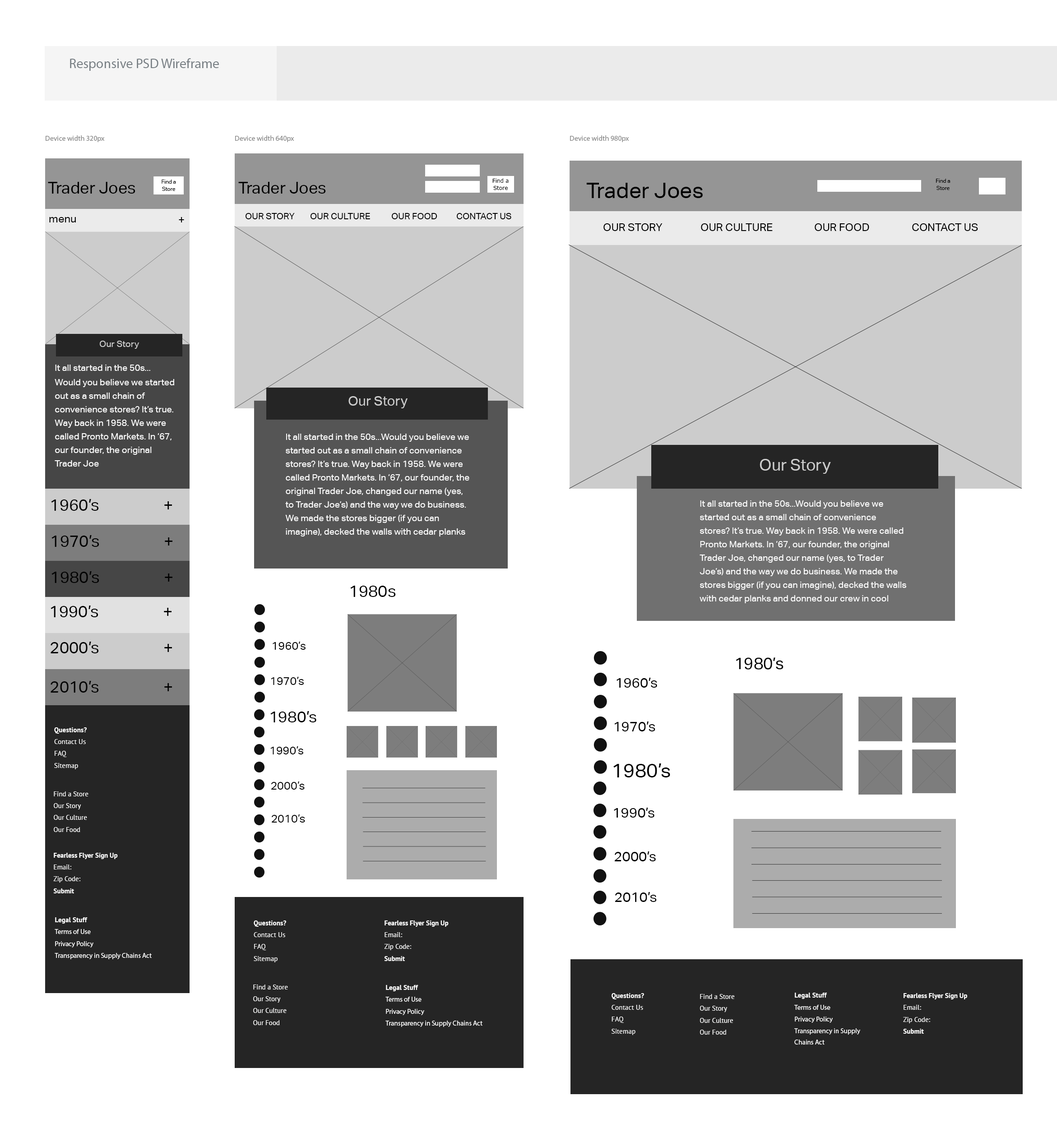
<style>
.page{position:relative;width:1057px;height:1128px;background:#ffffff}
.page>*{position:absolute;margin:0}
.t1{font:13.5px "MyriadPro-Regular";color:#787f84}
.t2{font:7.2px "MyriadPro-Regular";color:#878787}
.t3{font:16.2px "AktivGrotesk-Regular";color:#000000}
.t4{font:5.4px/6.3px "AktivGrotesk-Regular";color:#000000}
.t5{font:5.4px/6.3px "Verdana";color:#000000}
.t6{font:21.7px "AktivGrotesk-Regular";color:#000000}
.t7{font:10.8px "AktivGrotesk-Regular";color:#000000}
.t8{font:9px "AktivGrotesk-Regular";color:#000000}
.t9{font:9px "AktivGrotesk-Regular";color:#cccccc}
.t10{font:9px/13.5px "AktivGrotesk-Regular";color:#ffffff}
.t11{font:13.5px "AktivGrotesk-Regular";color:#cccccc}
.t12{font:16.2px "AktivGrotesk-Regular";color:#cccccc}
.t13{font:16.2px "AktivGrotesk-Regular";color:#020202}
.t14{font:11.3px "AktivGrotesk-Regular";color:#000000}
.t15{font:14.1px "AktivGrotesk-Regular";color:#000000}
.t16{font:15.8px "AktivGrotesk-Regular";color:#000000}
.t17{font:6.9px/11.3px "PTSans-Regular";color:#ffffff}
.t18{font:6.9px/11.3px "PTSans-Bold";color:#ffffff}
.t19{font:19.6px "AktivGrotesk-Regular";color:#000000}
.t20{font:6.8px/11.3px "PTSans-Regular";color:#ffffff}
.t21{font:6.8px/11.3px "PTSans-Bold";color:#ffffff}
.t22{font:6.8px/11.3px "MyriadPro-Regular";color:#ffffff}
</style>
<div class="page">
<p class="t1" style="left:70px;top:58px;width:149px;height:13px">Responsive PSD Wireframe</p>
<p class="t2" style="left:46px;top:135px;width:59px;height:7px">Device width 320px</p>
<p class="t2" style="left:235px;top:135px;width:59px;height:7px">Device width 640px</p>
<p class="t2" style="left:570px;top:135px;width:59px;height:7px">Device width 980px</p>
<p class="t3" style="left:48px;top:182px;width:87px;height:12px">Trader Joes</p>
<p class="t4" style="left:162px;top:180px;width:14px;height:11px;text-align:center">Find a <br>Store</p>
<p class="t3" style="left:238px;top:182px;width:88px;height:12px">Trader Joes</p>
<p class="t5" style="left:492px;top:178px;width:17px;height:12px;text-align:center">Find a <br>Store</p>
<p class="t6" style="left:586px;top:183px;width:117px;height:15px">Trader Joes</p>
<p class="t4" style="left:936px;top:179px;width:14px;height:11px;text-align:center">Find a <br>Store</p>
<p class="t7" style="left:49px;top:217px;width:27px;height:5px">menu</p>
<p class="t7" style="left:179px;top:217px;width:5px;height:5px">+</p>
<p class="t8" style="left:246px;top:213px;width:265px;height:6px">OUR STORY  OUR CULTURE   OUR FOOD   CONTACT US</p>
<p class="t7" style="left:603px;top:223px;width:375px;height:8px">OUR STORY   OUR CULTURE    OUR FOOD    CONTACT US</p>
<p class="t9" style="left:100px;top:341px;width:39px;height:8px">Our Story</p>
<p class="t10" style="left:55px;top:365px;width:119px;height:102px">It all started in the 50s...<br>Would you believe we started out as a small chain of convenience stores? It’s true. Way back in 1958. We were called Pronto Markets. In ‘67, our founder, the original Trader Joe</p>
<p class="t11" style="left:348px;top:396px;width:60px;height:12px">Our Story</p>
<p class="t10" style="left:285px;top:434px;width:184px;height:103px">It all started in the 50s...Would you believe we started out as a small chain of convenience stores? It’s true. Way back in 1958. We were called Pronto Markets. In ‘67, our founder, the original Trader Joe, changed our name (yes, to Trader Joe’s) and the way we do business. We made the stores bigger (if you can imagine), decked the walls with cedar planks and donned our crew in cool Hawaiian shirts.</p>
<p class="t12" style="left:760px;top:459px;width:71px;height:15px">Our Story</p>
<p class="t13" style="left:51px;top:499px;width:121px;height:12px">1960’s    +</p>
<p class="t10" style="left:699px;top:500px;width:207px;height:103px">It all started in the 50s...Would you believe we started out as a small chain of convenience stores? It’s true. Way back in 1958. We were called Pronto Markets. In ‘67, our founder, the original Trader Joe, changed our name (yes, to Trader Joe’s) and the way we do business. We made the stores bigger (if you can imagine), decked the walls with cedar planks and donned our crew in cool Hawaiian  shirts. Most importantly, we started packaging innovative, hard-to-find, great-tasting foods under the “Trader Joe’s” name.</p>
<p class="t13" style="left:51px;top:535px;width:121px;height:12px">1970’s    +</p>
<p class="t13" style="left:51px;top:571px;width:121px;height:12px">1980’s    +</p>
<p class="t3" style="left:350px;top:586px;width:46px;height:11px">1980s</p>
<p class="t13" style="left:51px;top:606px;width:120px;height:11px">1990’s    +</p>
<p class="t13" style="left:51px;top:642px;width:121px;height:11px">2000’s    +</p>
<p class="t14" style="left:273px;top:642px;width:33px;height:8px">1960’s</p>
<p class="t3" style="left:736px;top:658px;width:47px;height:12px">1980’s</p>
<p class="t14" style="left:271px;top:677px;width:33px;height:8px">1970’s</p>
<p class="t15" style="left:616px;top:678px;width:41px;height:10px">1960’s</p>
<p class="t13" style="left:51px;top:681px;width:121px;height:12px">2010’s    +</p>
<p class="t16" style="left:270px;top:711px;width:46px;height:12px">1980’s</p>
<p class="t15" style="left:614px;top:722px;width:41px;height:10px">1970’s</p>
<p class="t17" style="left:54px;top:727px;width:33px;height:42px"><span class="t18">Questions?<br></span>Contact Us<br>FAQ<br>Sitemap</p>
<p class="t14" style="left:270px;top:746px;width:33px;height:9px">1990’s</p>
<p class="t19" style="left:613px;top:764px;width:57px;height:14px">1980’s</p>
<p class="t14" style="left:271px;top:782px;width:34px;height:8px">2000’s</p>
<p class="t20" style="left:54px;top:792px;width:34px;height:40px">Find a Store<br>Our Story<br>Our Culture<br>Our Food</p>
<p class="t15" style="left:614px;top:808px;width:40px;height:10px">1990’s</p>
<p class="t14" style="left:272px;top:815px;width:33px;height:8px">2010’s</p>
<p class="t21" style="left:53px;top:853px;width:65px;height:41px">Fearless Flyer Sign Up<br><span class="t20">Email:<br>Zip Code:<br></span>Submit<br><span class="t20">Sug</span></p>
<p class="t15" style="left:614px;top:852px;width:42px;height:10px">2000’s</p>
<p class="t15" style="left:615px;top:892px;width:42px;height:10px">2010’s</p>
<p class="t22" style="left:55px;top:917px;width:97px;height:42px"><span class="t18">Legal Stuff<br></span>Terms of Use<br>Privacy Policy<br>Transparency in Supply Chains Act</p>
<p class="t17" style="left:254px;top:921px;width:32px;height:42px"><span class="t18">Questions?<br></span>Contact Us<br>FAQ<br>Sitemap</p>
<p class="t21" style="left:384px;top:921px;width:65px;height:40px">Fearless Flyer Sign Up<br><span class="t20">Email:<br>Zip Code:<br></span>Submit<br><span class="t20">Sug</span></p>
<p class="t20" style="left:253px;top:985px;width:35px;height:40px">Find a Store<br>Our Story<br>Our Culture<br>Our Food</p>
<p class="t22" style="left:385px;top:985px;width:97px;height:42px"><span class="t18">Legal Stuff<br></span>Terms of Use<br>Privacy Policy<br>Transparency in Supply Chains Act</p>
<p class="t17" style="left:611px;top:993px;width:33px;height:42px"><span class="t18">Questions?<br></span>Contact Us<br>FAQ<br>Sitemap</p>
<p class="t20" style="left:700px;top:994px;width:34px;height:41px">Find a Store<br>Our Story<br>Our Culture<br>Our Food</p>
<p class="t22" style="left:794px;top:993px;width:66px;height:52px"><span class="t18">Legal Stuff<br></span>Terms of Use<br>Privacy Policy<br>Transparency in Supply Chains Act</p>
<p class="t21" style="left:903px;top:993px;width:64px;height:41px">Fearless Flyer Sign Up<br><span class="t20">Email:<br>Zip Code:<br></span>Submit<br><span class="t20">Sug</span></p>
</div>
